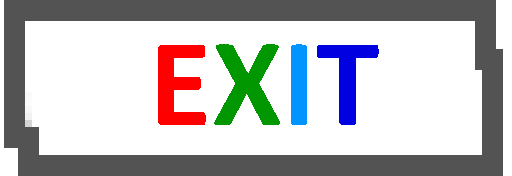
<style>
.page{position:relative;width:512px;height:176px;background:#ffffff}
.page>*{position:absolute;margin:0}
.t1{font:127.4px "Calibri-Bold";color:#ff0000}
.t2{font:127.4px "Calibri-Bold";color:#009700}
.t3{font:127.4px "Calibri-Bold";color:#0094ff}
.t4{font:127.4px "Calibri-Bold";color:#0000e0}
</style>
<div class="page">
<p class="t1" style="left:158px;top:44px;width:221px;height:81px">E<span class="t2">X</span><span class="t3">I</span><span class="t4">T</span></p>
</div>
